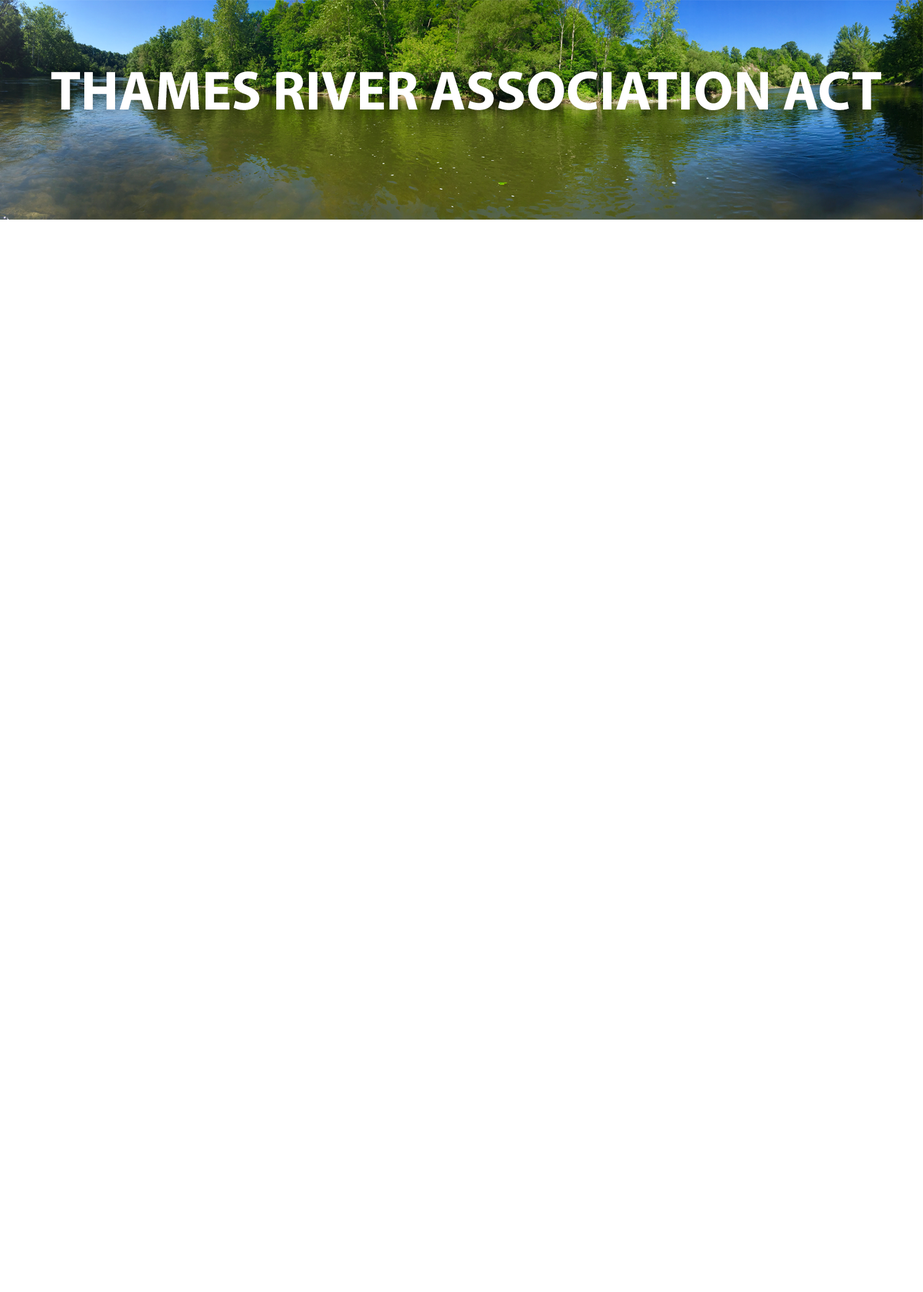
<style>
.page{position:relative;width:923px;height:1292px;background:#ffffff}
.page>*{position:absolute;margin:0}
.t1{font:55.4px "MyriadPro-Bold";color:#ffffff}
</style>
<div class="page">
<p class="t1" style="left:51px;top:71px;width:830px;height:39px">THAMES RIVER ASSOCIATION ACT</p>
</div>
